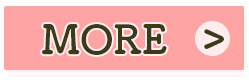
<style>
.page{position:relative;width:249px;height:82px;background:#ffa4a4}
.page>*{position:absolute;margin:0}
.t1{font:40px "TsukuBRdGothic-Bold";letter-spacing:-0.04em;color:#3b3b1a}
.t2{font:40px "TsukuBRdGothic-Bold";color:#3b3b1a}
.t3{font:40px "TsukuBRdGothic-Bold";letter-spacing:0.02em;color:#3b3b1a}
.t4{font:40px "TsukuBRdGothic-Bold";letter-spacing:-0.02em;color:#3b3b1a}
.t5{font:45px "TsukuBRdGothic-Bold";letter-spacing:-0.04em;color:#3b3b1a}
</style>
<div class="page">
<p class="t1" style="left:42px;top:24px;width:125px;height:31px">M<span class="t2">O</span><span class="t3">R</span><span class="t4">E</span></p>
<p class="t5" style="left:204px;top:29px;width:20px;height:20px">&gt;</p>
</div>
